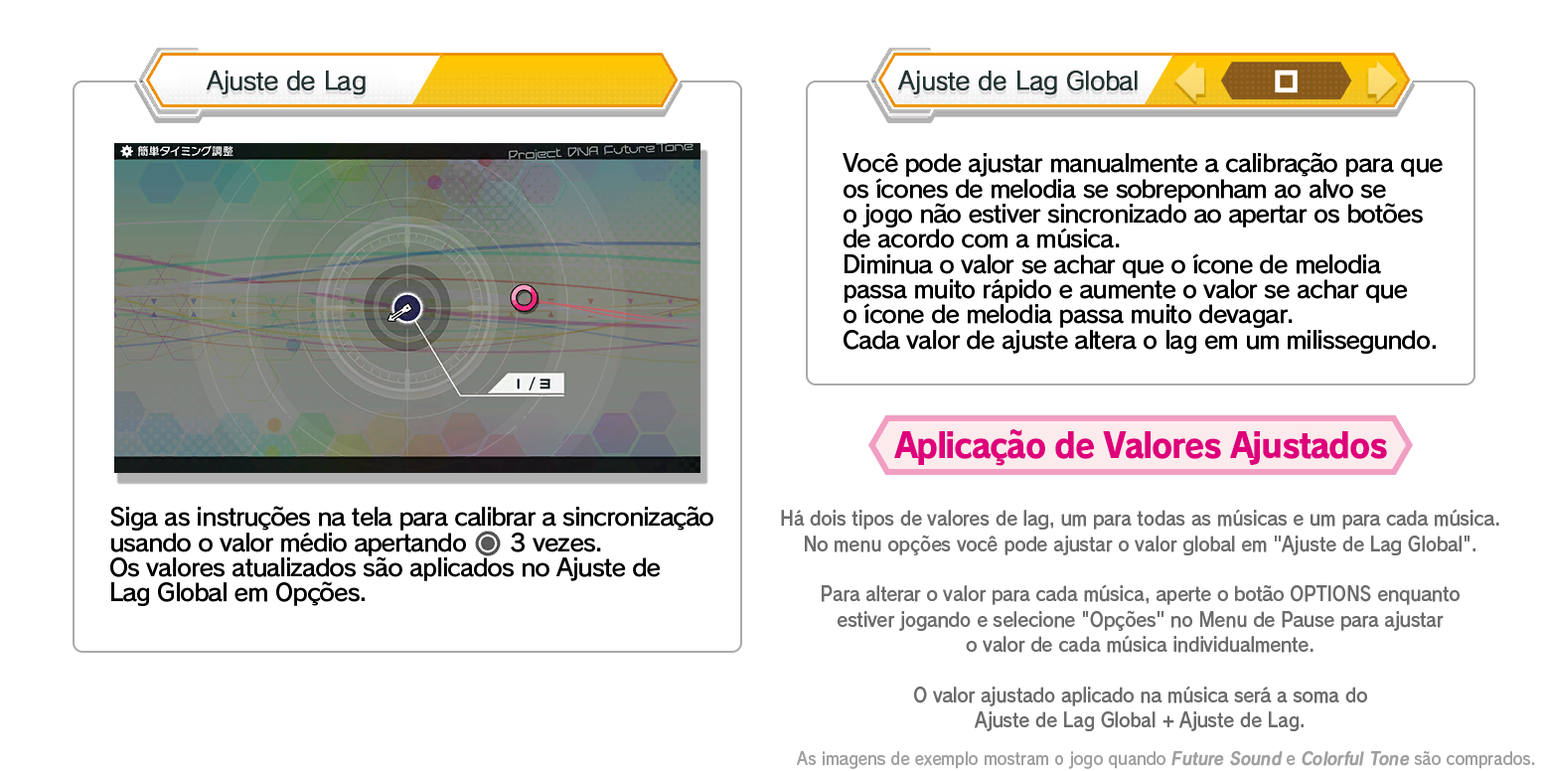
<style>
.page{position:relative;width:1546px;height:771px;background:#ffffff}
.page>*{position:absolute;margin:0}
.t1{font:23.9px "RodinPro-M";letter-spacing:-0.021em;color:#213131;font-weight:bold}
.t2{font:23.9px/25.2px "RodinPro-DB";letter-spacing:-0.04em;color:#000000}
.t3{font:34.5px "RodinPro-EB";letter-spacing:-0.048em;color:#de007b;scale:0.94 1}
.t4{font:19.9px/25.2px "RodinPro-DB";letter-spacing:-0.014em;color:#6b6c6b;scale:0.9 1}
.t5{font:17.2px "RodinPro-DB";color:#9fa19f;scale:0.89 1}
.t6{font:17.2px "RodinPro-DB";color:#9fa19f;font-weight:bold;font-style:italic;scale:0.89 1}
</style>
<div class="page">
<p class="t1" style="left:206px;top:70px;width:160px;height:25px">Ajuste de Lag</p>
<p class="t1" style="left:897px;top:70px;width:241px;height:25px">Ajuste de Lag Global</p>
<p class="t2" style="left:843px;top:152px;width:600px;height:202px">Você pode ajustar manualmente a calibração para que<br>os ícones de melodia se sobreponham ao alvo se<br>o jogo não estiver sincronizado ao apertar os botões<br>de acordo com a música.<br>Diminua o valor se achar que o ícone de melodia<br>passa muito rápido e aumente o valor se achar que<br>o ícone de melodia passa muito devagar.<br>Cada valor de ajuste altera o lag em um milissegundo.</p>
<p class="t3" style="left:894px;top:429px;width:493px;height:37px">Aplicação de Valores Ajustados</p>
<p class="t2" style="left:110px;top:506px;width:604px;height:100px">Siga as instruções na tela para calibrar a sincronização<br>usando o valor médio apertando      3 vezes.<br>Os valores atualizados são aplicados no Ajuste de<br>Lag Global em Opções.</p>
<p class="t4" style="left:781px;top:509px;width:719px;height:222px;text-align:center">Há dois tipos de valores de lag, um para todas as músicas e um para cada música.<br>No menu opções você pode ajustar o valor global em "Ajuste de Lag Global".<br><br>Para alterar o valor para cada música, aperte o botão OPTIONS enquanto<br>estiver jogando e selecione "Opções" no Menu de Pause para ajustar<br>o valor de cada música individualmente.<br><br>O valor ajustado aplicado na música será a soma do<br>Ajuste de Lag Global + Ajuste de Lag.</p>
<p class="t5" style="left:797px;top:751px;width:738px;height:18px">As imagens de exemplo mostram o jogo quando <span class="t6">Future Sound</span> e <span class="t6">Colorful Tone</span> são comprados.</p>
</div>
